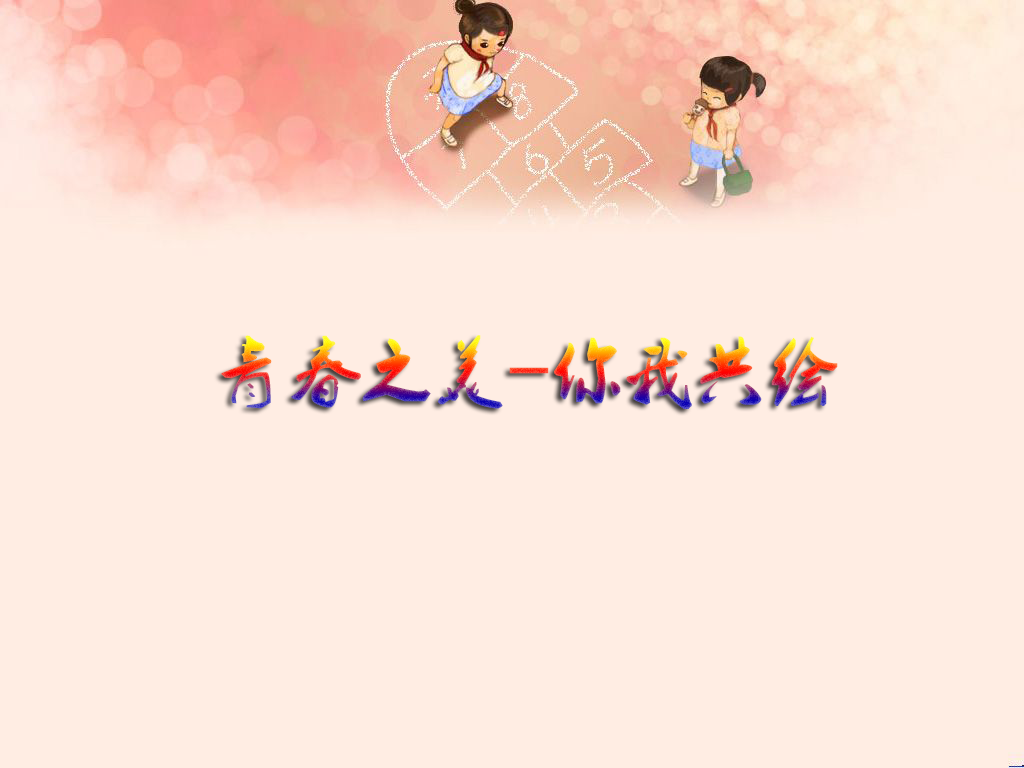
<style>
.page{position:relative;width:1024px;height:768px;background:#ffede3}
.page>*{position:absolute;margin:0}
.t1{font:72px "2.0-"}
</style>
<div class="page">
<p class="t1" style="left:221px;top:335px;width:617px;height:74px">青春之美-你我共绘</p>
</div>
